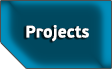
<style>
.page{position:relative;width:112px;height:69px;background:#00485f}
.page>*{position:absolute;margin:0}
.t1{font:16.6px "PFBeauSansPro-Bold";color:#ffffff;scale:0.96 1}
</style>
<div class="page">
<p class="t1" style="left:26px;top:25px;width:63px;height:17px">Projects</p>
</div>
